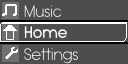
<style>
.page{position:relative;width:128px;height:64px;background:#4d4d4d}
.page>*{position:absolute;margin:0}
.t1{font:16px "TypoGroteskRounded-Light";color:#ffffff}
.t2{font:16px "TypoGroteskRounded";color:#ffffff}
.t3{font:16px "TypoGroteskRounded-Light"}
</style>
<div class="page">
<p class="t1" style="left:24px;top:5px;width:37px;height:12px">Music</p>
<p class="t2" style="left:24px;top:26px;width:43px;height:12px">Home</p>
<p class="t3" style="left:24px;top:48px;width:54px;height:16px">Settings</p>
</div>
